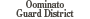
<style>
.page{position:relative;width:90px;height:19px;background:#ffffff}
.page>*{position:absolute;margin:0}
.t1{font:10px/9px "RyuminPro-ExBold";letter-spacing:-0.04em;color:#4c4843;scale:0.9 1}
</style>
<div class="page">
<p class="t1" style="left:16px;top:0px;width:58px;height:18px;text-align:center">Oominato<br>Guard District</p>
</div>
